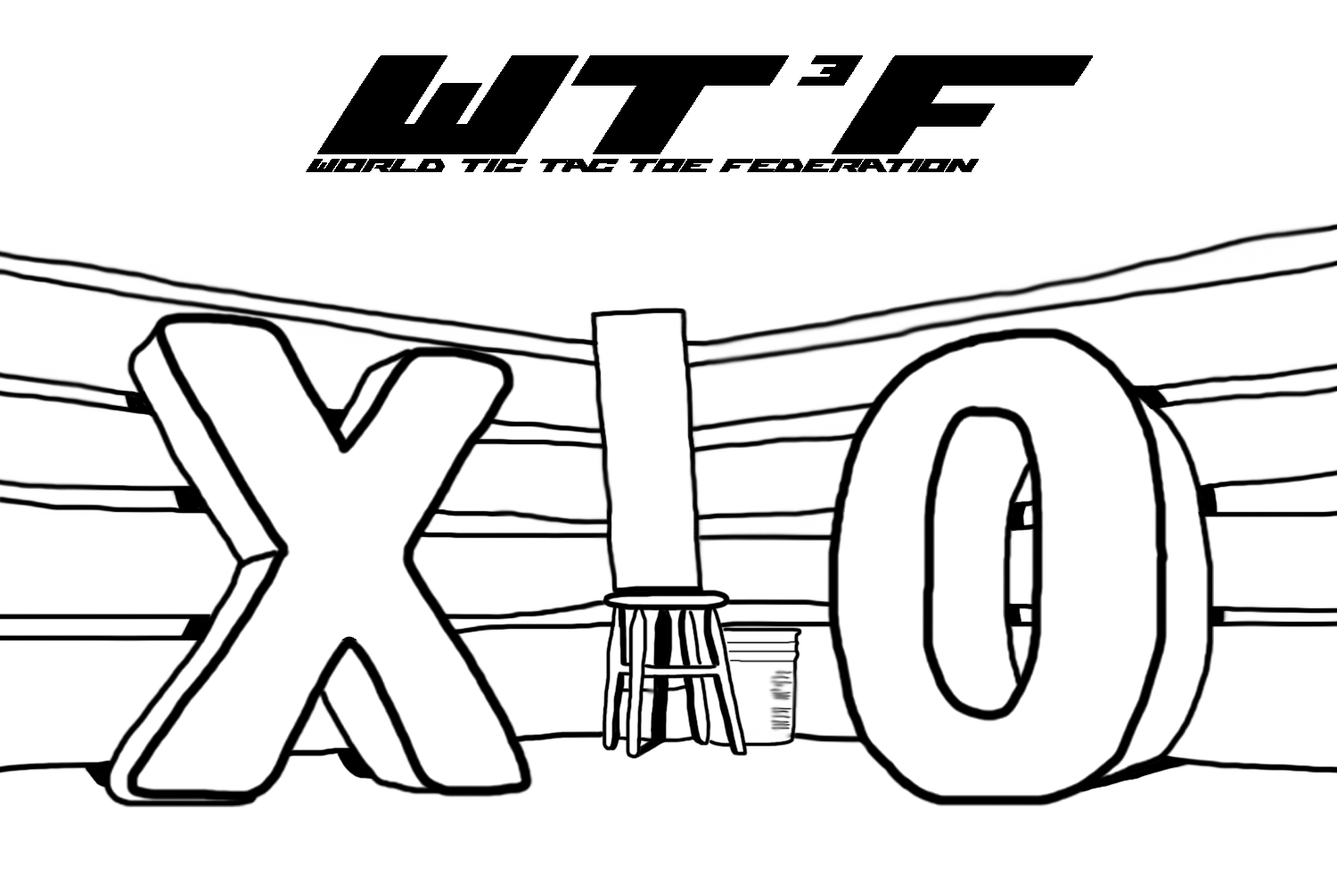
<style>
.page{position:relative;width:1337px;height:892px;background:#ffffff}
.page>*{position:absolute;margin:0}
.t1{font:326.1px "WWERaw";color:#000000}
.t2{font:100.6px "WWERaw";color:#000000}
.t3{font:42.8px "WWERaw";color:#000000}
</style>
<div class="page">
<p class="t1" style="left:317px;top:55px;width:776px;height:99px">WT F</p>
<p class="t2" style="left:797px;top:55px;width:66px;height:31px">3</p>
<p class="t3" style="left:306px;top:159px;width:673px;height:13px">World Tic Tac Toe Federation</p>
</div>
